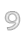
<style>
.page{position:relative;width:25px;height:35px;background:#ffffff}
.page>*{position:absolute;margin:0}
.t1{font:32px "BerlinSansFB-Reg";font-weight:bold}
</style>
<div class="page">
<p class="t1" style="left:4px;top:11px;width:17px;height:20px">9</p>
</div>
